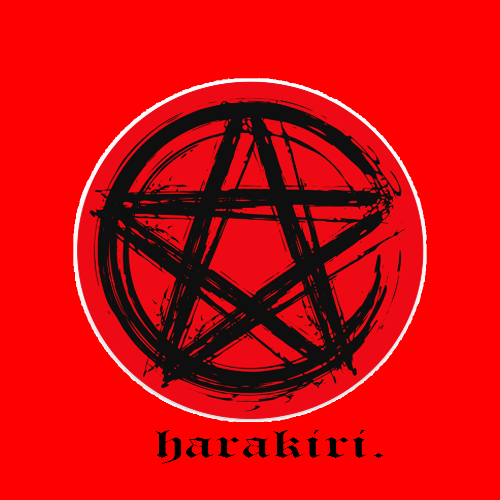
<style>
.page{position:relative;width:500px;height:500px;background:#ff0000}
.page>*{position:absolute;margin:0}
.t1{font:30.3px "OldEnglishTextMT";color:#000000;scale:1.67 1}
.t2{font:30.3px "OldEnglishTextMT";color:#ff0000;scale:1.67 1}
</style>
<div class="page">
<p class="t1" style="left:94px;top:430px;width:290px;height:34px"><span class="t2">ha</span>harakiri.</p>
</div>
